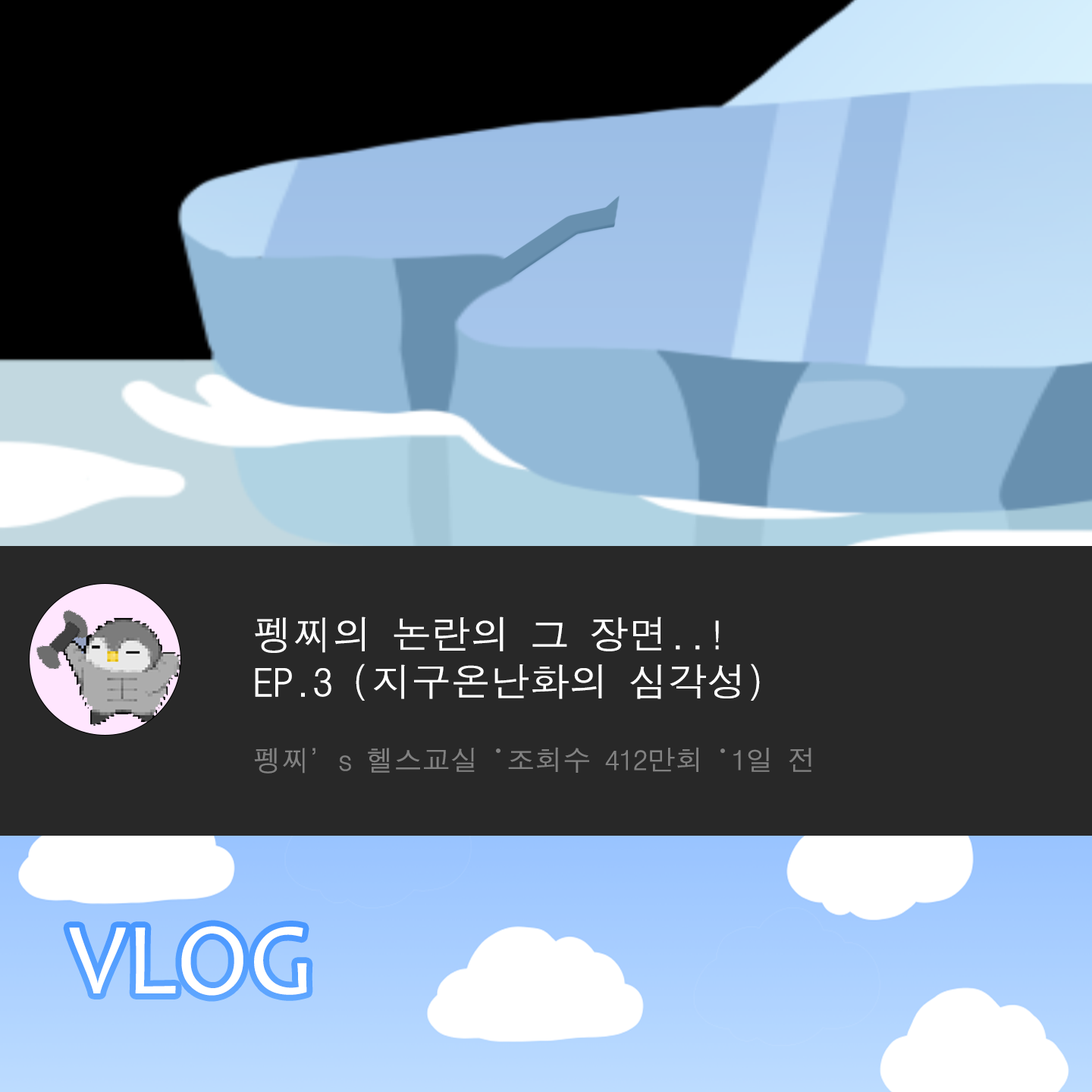
<style>
.page{position:relative;width:1092px;height:1092px;background:#282828}
.page>*{position:absolute;margin:0}
.t1{font:39.5px "DotumChe";color:#ffffff}
.t2{font:28.1px "DotumChe";color:#818181}
.t3{font:103.1px "Candara";color:#ffffff}
</style>
<div class="page">
<p class="t1" style="left:255px;top:617px;width:505px;height:84px">펭찌의 논란의 그 장면..!<br>EP.3 (지구온난화의 심각성)</p>
<p class="t2" style="left:254px;top:747px;width:557px;height:26px">펭찌’s 헬스교실  조회수 412만회  1일 전</p>
<p class="t3" style="left:69px;top:926px;width:238px;height:70px">VLOG</p>
</div>
